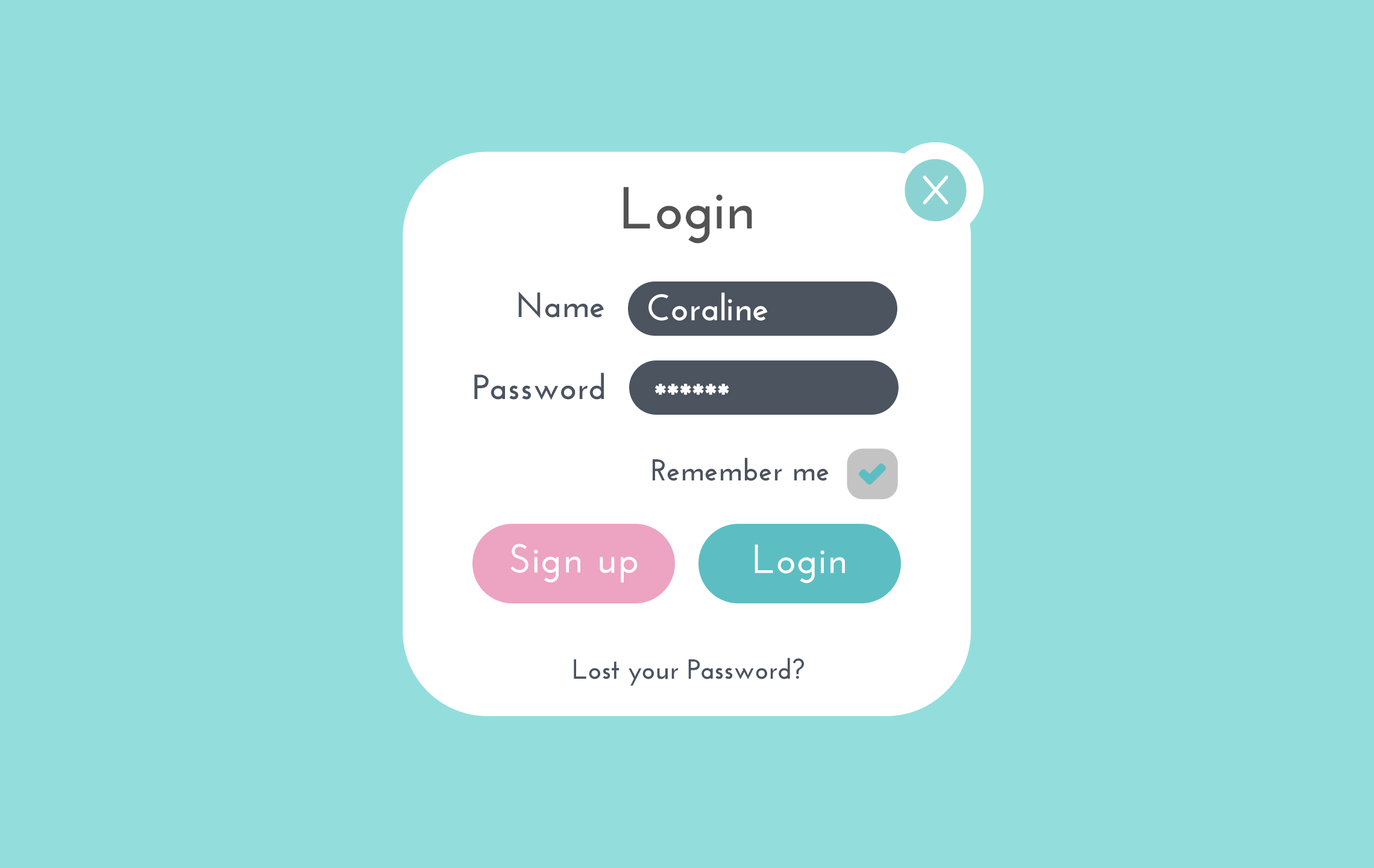
<style>
.page{position:relative;width:1374px;height:868px;background:#93dedd}
.page>*{position:absolute;margin:0}
.t1{font:59.3px "JosefinSans-Bold";color:#535353}
.t2{font:35px "JosefinSans-Bold";color:#4b545f}
.t3{font:36.7px "JosefinSans-Bold";color:#ffffff}
.t4{font:35px "JosefinSans-Bold";color:#4b535f}
.t5{font:38px "JosefinSans-Bold";color:#ffffff}
.t6{font:30.1px "JosefinSans-Bold";color:#4b535f}
.t7{font:39.9px "JosefinSans-SemiBold";color:#ffffff;font-weight:bold}
.t8{font:27.7px "JosefinSans-Bold";color:#4b535f}
</style>
<div class="page">
<p class="t1" style="left:623px;top:187px;width:129px;height:56px">Login</p>
<p class="t2" style="left:518px;top:291px;width:86px;height:27px">Name</p>
<p class="t3" style="left:648px;top:292px;width:120px;height:29px">Coraline</p>
<p class="t4" style="left:474px;top:372px;width:130px;height:28px">Password</p>
<p class="t5" style="left:654px;top:383px;width:75px;height:12px">******</p>
<p class="t6" style="left:653px;top:457px;width:176px;height:24px">Remember me</p>
<p class="t7" style="left:510px;top:544px;width:128px;height:39px">Sign up</p>
<p class="t7" style="left:755px;top:544px;width:90px;height:39px">Login</p>
<p class="t8" style="left:574px;top:657px;width:230px;height:29px">Lost your Password?</p>
</div>
